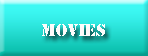
<style>
.page{position:relative;width:148px;height:56px}
.page>*{position:absolute;margin:0}
.t1{font:16px "StencilStd";color:#fcf6f6}
</style>
<div class="page">
<p class="t1" style="left:42px;top:24px;width:63px;height:12px">MOVIES</p>
</div>
